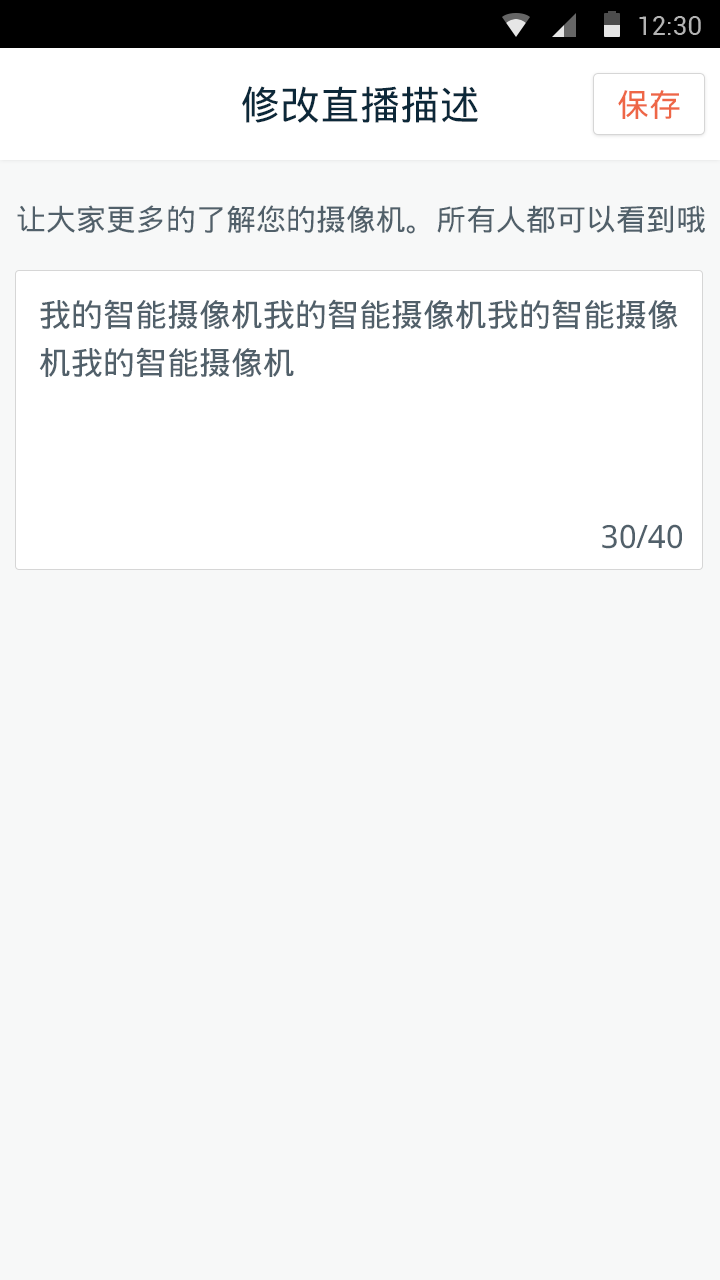
<style>
.page{position:relative;width:720px;height:1280px;background:#f7f8f8}
.page>*{position:absolute;margin:0}
.t1{font:40px "DroidSansFallback";color:#0c2839}
.t2{font:32px "DroidSansFallback";color:#ee6646}
.t3{font:30px "DroidSansFallback";color:#51606a}
.t4{font:32px/48px "DroidSansFallback";color:#51606a}
.t5{font:32px "DroidSansFallback";color:#51606a}
</style>
<div class="page">
<p class="t1" style="left:242px;top:86px;width:236px;height:37px">修改直播描述</p>
<p class="t2" style="left:618px;top:90px;width:62px;height:29px">保存</p>
<p class="t3" style="left:17px;top:205px;width:688px;height:29px">让大家更多的了解您的摄像机。所有人都可以看到哦</p>
<p class="t4" style="left:39px;top:299px;width:639px;height:78px">我的智能摄像机我的智能摄像机我的智能摄像<br>机我的智能摄像机</p>
<p class="t5" style="left:602px;top:524px;width:80px;height:25px">30/40</p>
</div>
